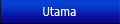
<style>
.page{position:relative;width:120px;height:24px}
.page>*{position:absolute;margin:0}
.t1{font:12px "Verdana";color:#ffffff;scale:0.86 1}
</style>
<div class="page">
<p class="t1" style="left:43px;top:7px;width:33px;height:9px">Utama</p>
</div>
